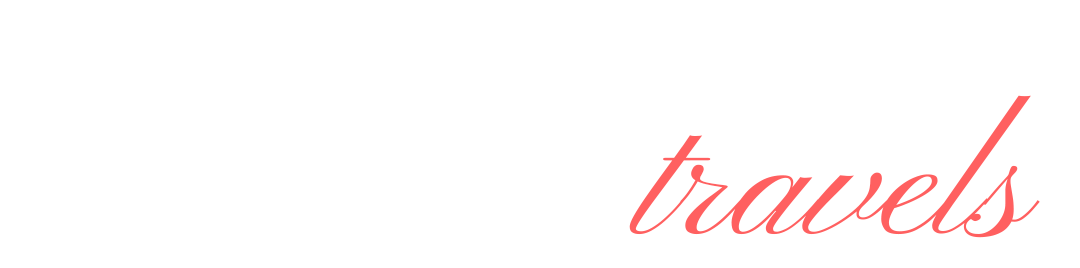
<style>
.page{position:relative;width:1080px;height:268px;background:#ffffff}
.page>*{position:absolute;margin:0}
.t1{font:223.8px "Kapakana-Regular";color:#ff6060}
</style>
<div class="page">
<p class="t1" style="left:629px;top:95px;width:411px;height:143px">travels</p>
</div>
